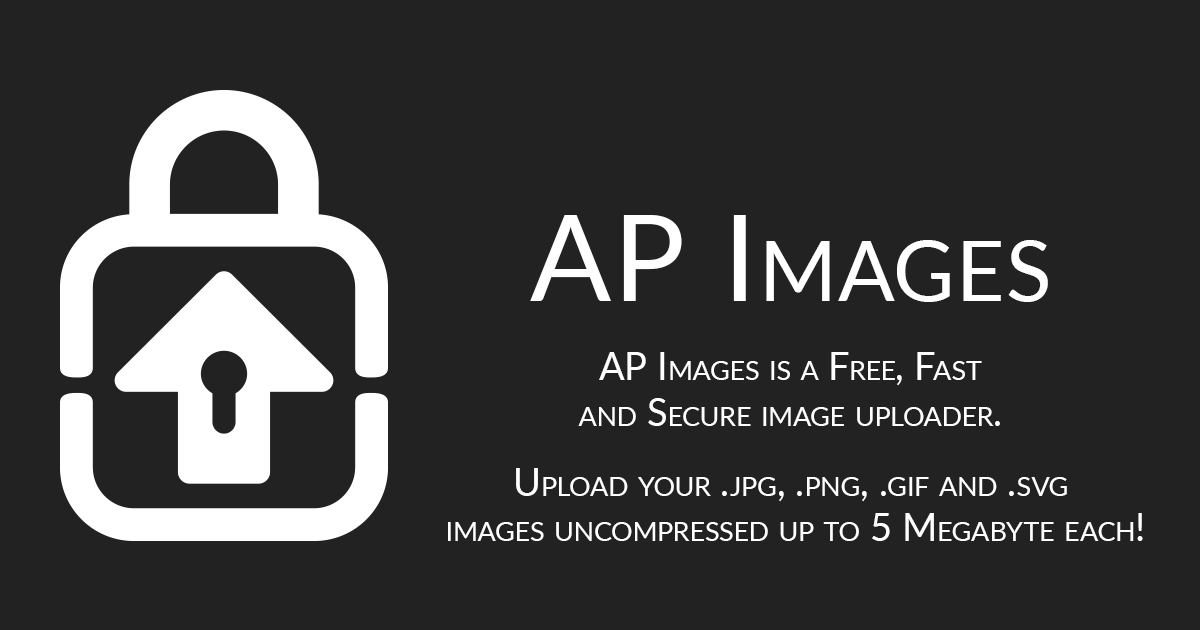
<style>
.page{position:relative;width:1200px;height:630px;background:#222222}
.page>*{position:absolute;margin:0}
.t1{font:120px "Lato-Regular";letter-spacing:0.03em;color:#ffffff;font-variant:small-caps}
.t2{font:38.1px "Lato-Regular";color:#ffffff;font-variant:small-caps}
.t3{font:38.1px/70px "Lato-Regular";color:#ffffff;font-variant:small-caps}
</style>
<div class="page">
<p class="t1" style="left:530px;top:215px;width:518px;height:87px">AP Images</p>
<p class="t2" style="left:448px;top:352px;width:695px;height:189px;text-align:center">AP Images is a Free, Fast <br>and Secure image uploader. <br><span class="t3">Upload your .jpg, .png, .gif and .svg <br></span>images uncompressed up to 5 Megabyte each!</p>
</div>
